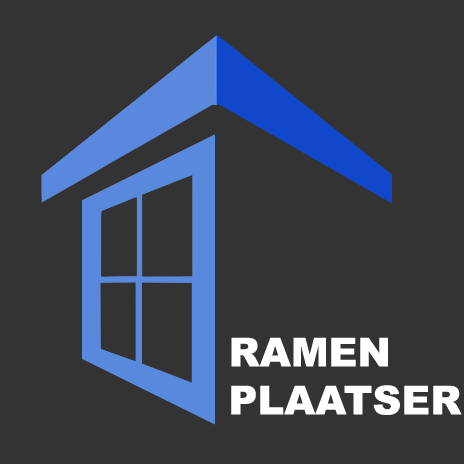
<style>
.page{position:relative;width:464px;height:464px;background:#333333}
.page>*{position:absolute;margin:0}
.t1{font:40px "Arial-Black";color:#ffffff}
</style>
<div class="page">
<p class="t1" style="left:231px;top:337px;width:231px;height:78px">RAMEN<br>PLAATSER</p>
</div>
